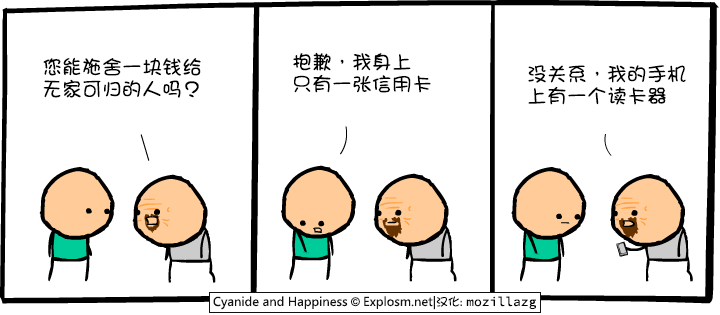
<style>
.page{position:relative;width:720px;height:315px;background:#ffffff}
.page>*{position:absolute;margin:0}
.t1{font:20px/22px "DFGirl";color:#000000}
</style>
<div class="page">
<p class="t1" style="left:293px;top:52px;width:138px;height:41px">抱歉，我身上<br>只有一张信用卡</p>
<p class="t1" style="left:43px;top:57px;width:158px;height:41px">您能施舍一块钱给<br>无家可归的人吗？</p>
<p class="t1" style="left:528px;top:65px;width:158px;height:40px">没关系，我的手机<br>上有一个读卡器</p>
</div>
